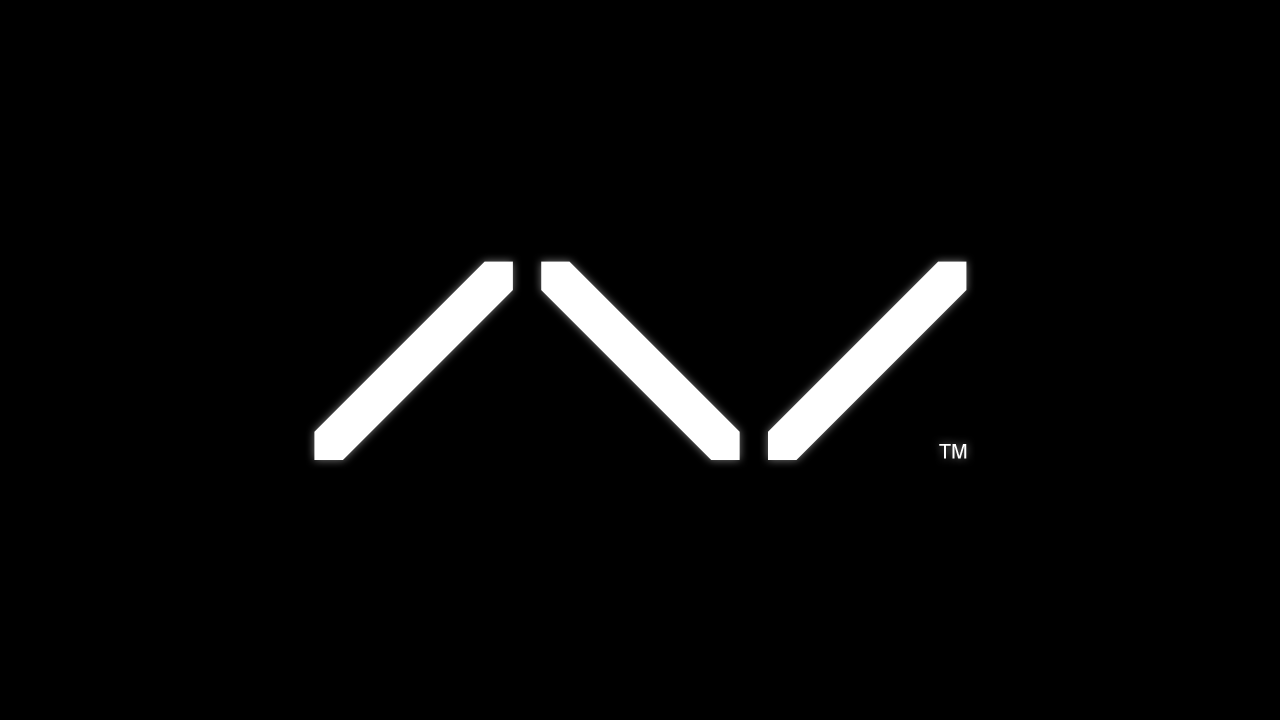
<style>
.page{position:relative;width:1280px;height:720px;background:#000000}
.page>*{position:absolute;margin:0}
.t1{font:20px "ArialMT";color:#ffffff}
</style>
<div class="page">
<p class="t1" style="left:939px;top:444px;width:28px;height:15px">TM</p>
</div>
